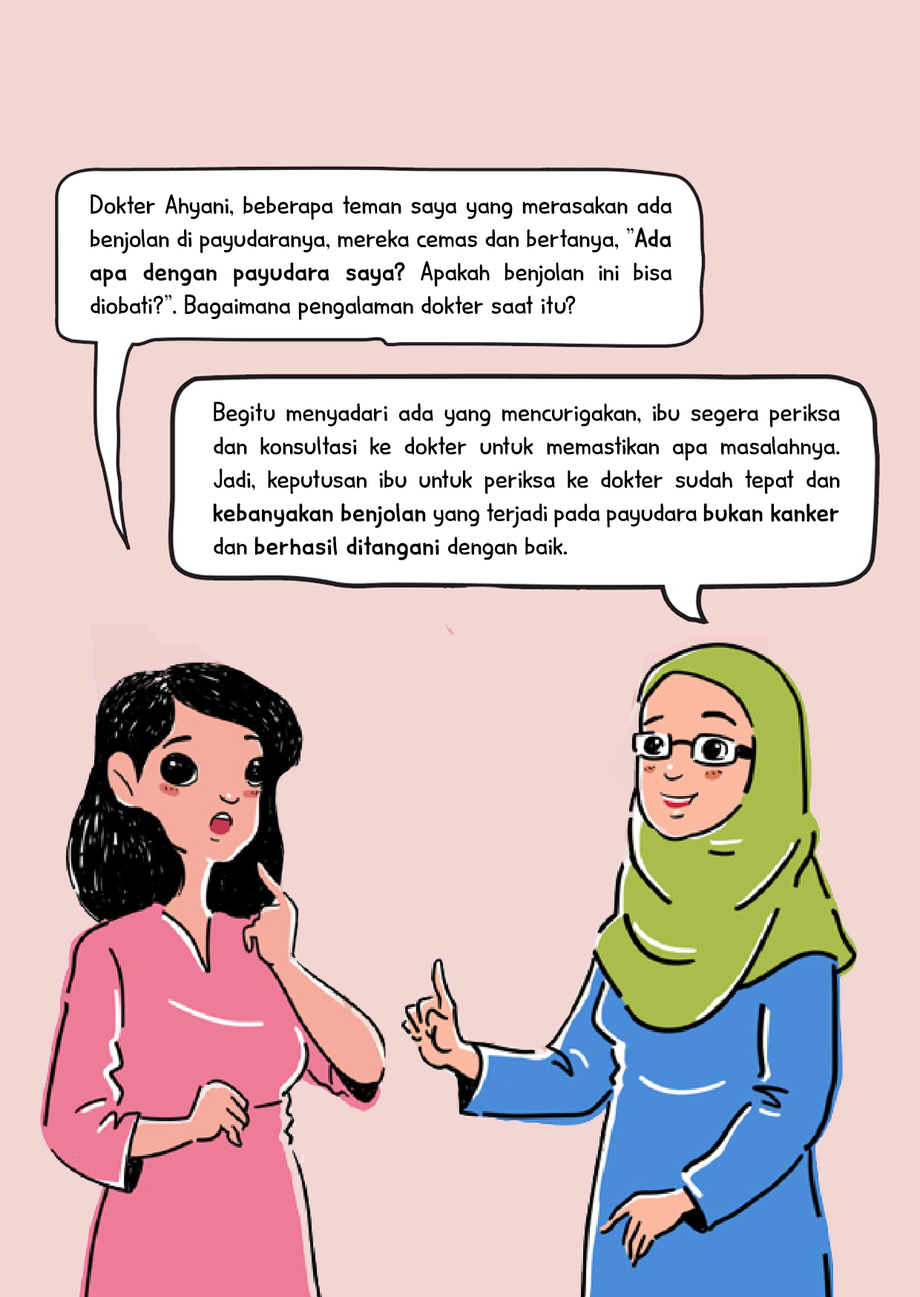
<style>
.page{position:relative;width:920px;height:1297px;background:#f3d5d3}
.page>*{position:absolute;margin:0}
.t1{font:27.8px "MinouDEMO-Regular";color:#010000}
.t2{font:27.8px "MinouDEMO-Regular";color:#010000;font-weight:bold}
.t3{font:27.8px "MinouDEMO-Regular";color:#000000}
.t4{font:27.8px "MinouDEMO-Regular";color:#000000;font-weight:bold}
</style>
<div class="page">
<p class="t1" style="left:90px;top:194px;width:581px;height:126px;text-align:justify">Dokter Ahyani, beberapa teman saya yang merasakan ada benjolan di payudaranya, mereka cemas dan bertanya, "<span class="t2">Ada apa dengan payudara saya?</span> Apakah benjolan ini bisa diobati?". Bagaimana pengalaman dokter saat itu?</p>
<p class="t3" style="left:213px;top:401px;width:627px;height:159px;text-align:justify">Begitu menyadari ada yang mencurigakan, ibu segera periksa dan konsultasi ke dokter untuk memastikan apa masalahnya. Jadi, keputusan ibu untuk periksa ke dokter sudah tepat dan <span class="t4">kebanyakan benjolan</span> yang terjadi pada payudara <span class="t4">bukan kanker</span> dan <span class="t4">berhasil ditangani</span> dengan baik.</p>
</div>
